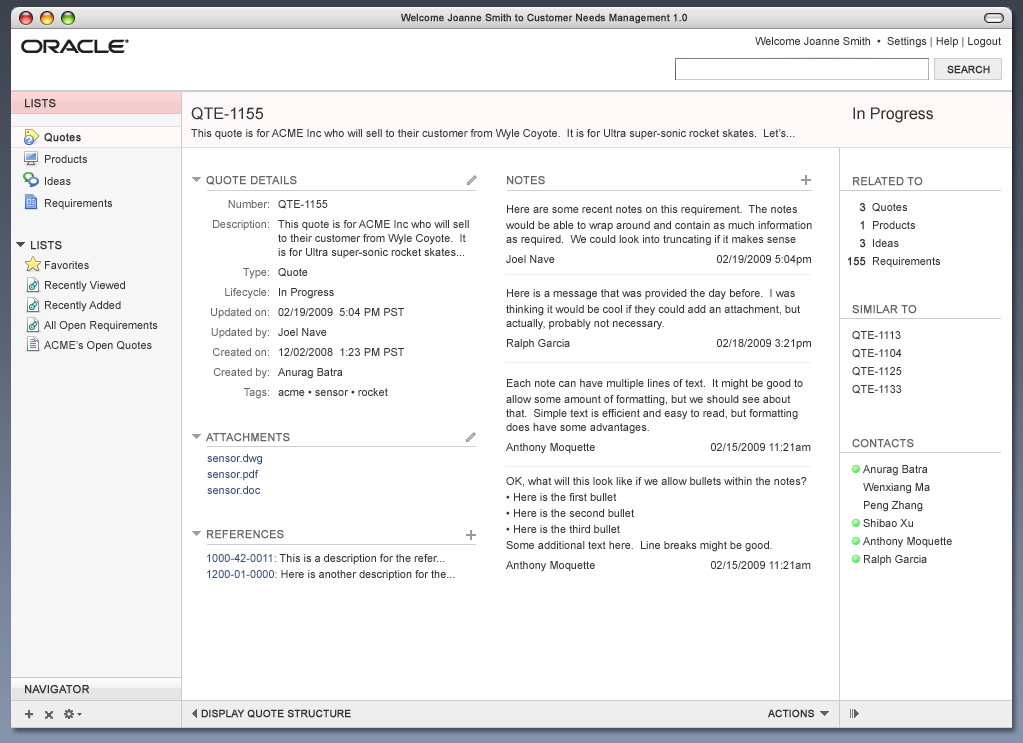
<style>
.page{position:relative;width:1023px;height:743px;background:#ffffff}
.page>*{position:absolute;margin:0}
.t1{font:10px "ArialMT";color:#333333;font-weight:bold}
.t2{font:11px "ArialMT";color:#333333}
.t3{font:11px "ArialMT";color:#333333;text-transform:uppercase;font-weight:bold}
.t4{font:16px "ArialMT";color:#333333}
.t5{font:11px/22px "ArialMT";color:#333333}
.t6{font:11px/22px "ArialMT";color:#333333;font-weight:bold}
.t7{font:11px "ArialMT";color:#666666;text-transform:uppercase;font-weight:bold}
.t8{font:11px "ArialMT";color:#666666;font-weight:bold}
.t9{font:11px/20px "ArialMT";color:#666666}
.t10{font:11px/20px "ArialMT";color:#333333}
.t11{font:11px/14px "ArialMT";color:#333333}
.t12{font:11px/16px "ArialMT";color:#333333}
.t13{font:11px/18px "ArialMT";color:#333333;font-weight:bold}
.t14{font:11px/18px "ArialMT";color:#333333}
.t15{font:11px/16px "ArialMT";color:#364d7b}
.t16{font:11px/20px "ArialMT";color:#364d7b}
.t17{font:10px "ArialMT";color:#333333;text-transform:uppercase;font-weight:bold}
</style>
<div class="page">
<p class="t1" style="left:401px;top:13px;width:286px;height:11px">Welcome Joanne Smith to Customer Needs Management 1.0</p>
<p class="t2" style="left:755px;top:37px;width:246px;height:11px">Welcome Joanne Smith  •  Settings | Help | Logout</p>
<p class="t1" style="left:947px;top:65px;width:43px;height:9px">SEARCH</p>
<p class="t3" style="left:25px;top:99px;width:31px;height:9px">Lists</p>
<p class="t4" style="left:191px;top:107px;width:72px;height:13px">QTE-1155</p>
<p class="t4" style="left:853px;top:107px;width:80px;height:16px">In Progress</p>
<p class="t5" style="left:44px;top:133px;width:68px;height:77px"><span class="t6">Quotes<br></span>Products<br>Ideas<br>Requirements</p>
<p class="t2" style="left:191px;top:129px;width:604px;height:11px">This quote is for ACME Inc who will sell to their customer from Wyle Coyote.  It is for Ultra super-sonic rocket skates.  Let’s...</p>
<p class="t7" style="left:206px;top:176px;width:91px;height:9px"><span class="t8">Q</span>uote Details</p>
<p class="t7" style="left:507px;top:176px;width:38px;height:9px"><span class="t8">N</span>otes</p>
<p class="t7" style="left:853px;top:177px;width:70px;height:9px"><span class="t8">R</span>elated To</p>
<p class="t9" style="left:211px;top:200px;width:58px;height:199px;text-align:right">Number:<br>Description:<br><br><br>Type:<br>Lifecycle:<br>Updated on:<br>Updated by:<br>Created on:<br>Created by:<br>Tags:</p>
<p class="t10" style="left:278px;top:200px;width:191px;height:196px">QTE-1155<br>This quote is for ACME Inc who will sell<br><span class="t11">to their customer from Wyle Coyote.  It <br>is for Ultra super-sonic rocket skates...<br></span>Quote<br>In Progress<br>02/19/2009  5:04 PM PST<br>Joel Nave<br>12/02/2008  1:23 PM PST<br>Anurag Batra<br>acme • sensor • rocket</p>
<p class="t11" style="left:506px;top:205px;width:306px;height:61px"><span class="t12">Here are some recent notes on this requirement.  The notes <br>would be </span>able to wrap around and contain as much information <br>as required.  We could look into truncating if it makes sense<br><span class="t10">Joel Nave              02/19/2009 5:04pm</span></p>
<p class="t13" style="left:848px;top:203px;width:18px;height:63px;text-align:right">3<br>1<br>3<br>155</p>
<p class="t14" style="left:872px;top:203px;width:68px;height:65px">Quotes<br>Products<br>Ideas<br>Requirements</p>
<p class="t3" style="left:31px;top:241px;width:31px;height:9px">lists</p>
<p class="t10" style="left:44px;top:261px;width:114px;height:91px">Favorites<br>Recently Viewed<br>Recently Added<br>All Open Requirements<br>ACME’s Open Quotes</p>
<p class="t11" style="left:506px;top:289px;width:305px;height:61px"><span class="t12">Here is a message that was provided the day before.  I was <br>thinking it </span>would be cool if they could add an attachment, but <br>actually, probably not necessary.<br><span class="t10">Ralph Garcia              02/18/2009 3:21pm</span></p>
<p class="t7" style="left:852px;top:305px;width:65px;height:9px"><span class="t8">S</span>IMILAR TO</p>
<p class="t14" style="left:852px;top:331px;width:50px;height:63px">QTE-1113<br>QTE-1104<br>QTE-1125<br>QTE-1133</p>
<p class="t11" style="left:506px;top:379px;width:305px;height:75px"><span class="t12">Each note can have multiple lines of text.  It might be good to <br>allow some amount </span>of formatting, but we should see about <br>that.  Simple text is efficient and easy to read, but formatting <br>does have some advantages.<br><span class="t10">Anthony Moquette           02/15/2009 11:21am</span></p>
<p class="t7" style="left:206px;top:433px;width:84px;height:9px"><span class="t8">A</span>ttachments</p>
<p class="t7" style="left:852px;top:439px;width:62px;height:9px">contacts</p>
<p class="t15" style="left:207px;top:454px;width:55px;height:40px">sensor.dwg<br>sensor.pdf<br>sensor.doc</p>
<p class="t14" style="left:863px;top:465px;width:89px;height:101px">Anurag Batra<br>Wenxiang Ma<br>Peng Zhang<br>Shibao Xu<br>Anthony Moquette<br>Ralph Garcia</p>
<p class="t12" style="left:506px;top:477px;width:305px;height:95px">OK, what will this look like if we allow bullets within the notes?<br>• Here is the first bullet<br>• Here is the second bullet<br>• Here is the third bullet<br>Some additional text here.  Line breaks might be good.  <br><span class="t10">Anthony Moquette           02/15/2009 11:21am</span></p>
<p class="t7" style="left:207px;top:530px;width:77px;height:9px"><span class="t8">R</span>eferences</p>
<p class="t10" style="left:207px;top:554px;width:248px;height:27px"><span class="t16">1000-42-0011: </span>This is a description for the refer...<br><span class="t15">1200-01-0000: </span><span class="t12">Here is another description for the...</span></p>
<p class="t3" style="left:25px;top:685px;width:65px;height:9px">navigator</p>
<p class="t17" style="left:201px;top:709px;width:150px;height:9px">Display Quote Structure</p>
<p class="t17" style="left:768px;top:709px;width:46px;height:9px">actions</p>
</div>
